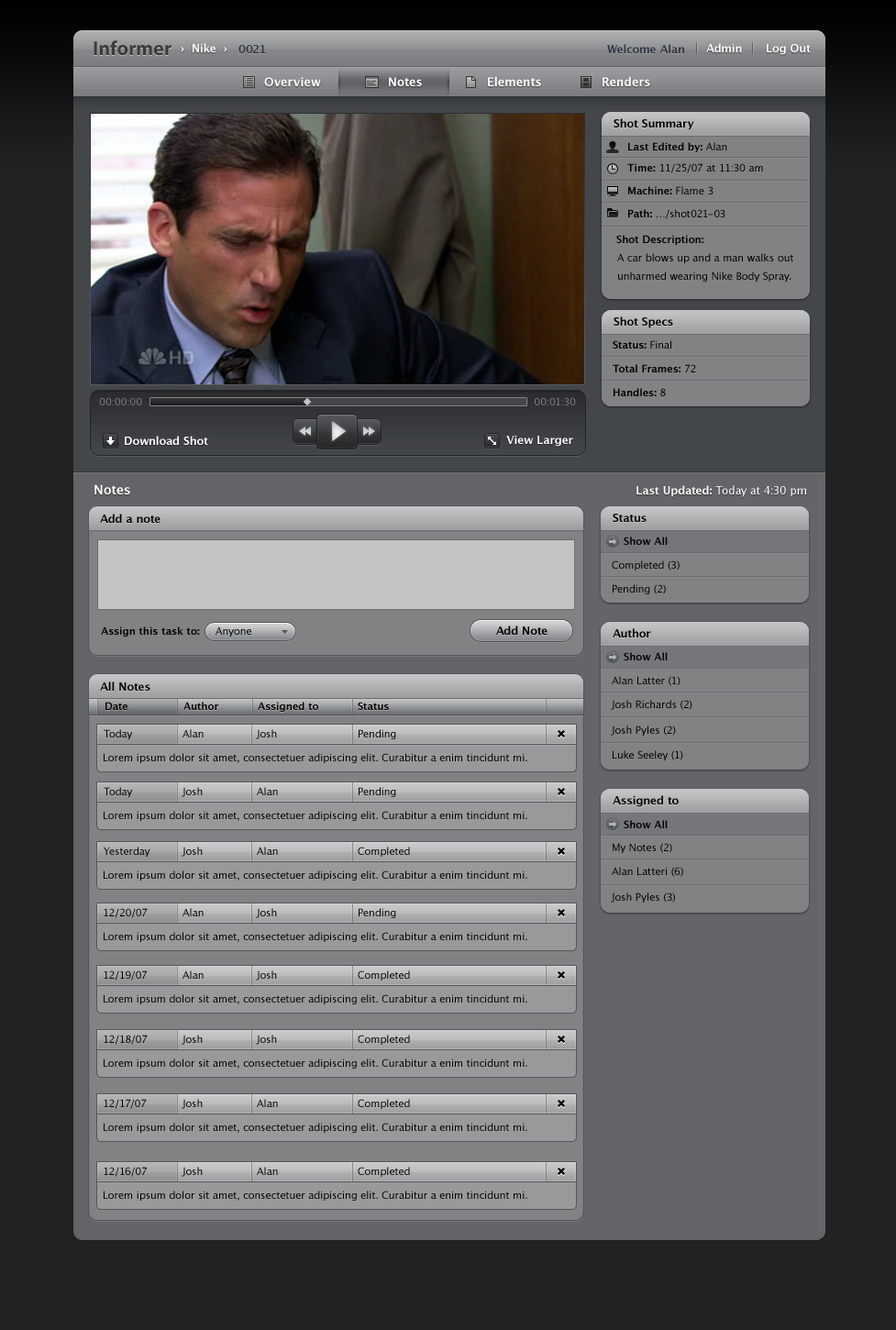
<style>
.page{position:relative;width:896px;height:1330px}
.page>*{position:absolute;margin:0}
.t1{font:20.2px "MyriadPro-Bold";color:#3c3c3c}
.t2{font:11px "LucidaGrande-Bold";color:#ffffff}
.t3{font:11px "LucidaGrande-Bold";color:#303643}
.t4{font:11.9px "LucidaGrande-Bold";color:#ffffff}
.t5{font:11px "LucidaGrande-Bold";color:#000000}
.t6{font:10.1px "LucidaGrande-Bold";color:#000000}
.t7{font:10.1px "LucidaGrande";color:#000000}
.t8{font:10.1px/18px "LucidaGrande";color:#000000}
.t9{font:10.1px "LucidaGrande";color:#808284}
.t10{font:12.8px "LucidaGrande-Bold";color:#ffffff}
.t11{font:11px "LucidaGrande";color:#ffffff}
.t12{font:10.1px "LucidaGrande-Bold";color:#020202}
</style>
<div class="page">
<p class="t1" style="left:94px;top:40px;width:78px;height:16px">Informer</p>
<p class="t2" style="left:181px;top:43px;width:47px;height:9px">›  Nike  ›</p>
<p class="t3" style="left:239px;top:45px;width:27px;height:8px">0021</p>
<p class="t3" style="left:607px;top:44px;width:77px;height:9px">Welcome Alan</p>
<p class="t2" style="left:706px;top:43px;width:36px;height:9px">Admin</p>
<p class="t2" style="left:767px;top:44px;width:44px;height:11px">Log Out</p>
<p class="t4" style="left:264px;top:77px;width:57px;height:9px">Overview</p>
<p class="t4" style="left:389px;top:77px;width:33px;height:9px">Notes</p>
<p class="t4" style="left:488px;top:76px;width:53px;height:10px">Elements</p>
<p class="t4" style="left:603px;top:76px;width:47px;height:10px">Renders</p>
<p class="t5" style="left:614px;top:118px;width:81px;height:12px">Shot Summary</p>
<p class="t6" style="left:628px;top:142px;width:100px;height:10px">Last Edited by:<span class="t7"> Alan</span></p>
<p class="t7" style="left:628px;top:163px;width:135px;height:10px"><span class="t6">Time: </span>11/25/07 at 11:30 am</p>
<p class="t6" style="left:628px;top:186px;width:86px;height:9px">Machine: <span class="t7">Flame 3</span></p>
<p class="t7" style="left:628px;top:209px;width:98px;height:10px"><span class="t6">Path: </span>…/shot021-03</p>
<p class="t6" style="left:617px;top:235px;width:87px;height:10px">Shot Description:</p>
<p class="t8" style="left:617px;top:253px;width:177px;height:29px">A car blows up and a man walks out unharmed wearing Nike Body Spray.</p>
<p class="t5" style="left:614px;top:317px;width:59px;height:11px">Shot Specs</p>
<p class="t6" style="left:613px;top:340px;width:59px;height:9px">Status:<span class="t7"> Final</span></p>
<p class="t6" style="left:613px;top:364px;width:83px;height:8px">Total Frames:<span class="t7"> 72</span></p>
<p class="t6" style="left:614px;top:388px;width:52px;height:8px">Handles:<span class="t7"> 8</span></p>
<p class="t9" style="left:99px;top:397px;width:43px;height:9px">00:00:00</p>
<p class="t9" style="left:535px;top:397px;width:41px;height:9px">00:01:30</p>
<p class="t2" style="left:125px;top:436px;width:83px;height:9px">Download Shot</p>
<p class="t2" style="left:506px;top:436px;width:67px;height:11px">View Larger</p>
<p class="t10" style="left:94px;top:484px;width:36px;height:11px">Notes</p>
<p class="t11" style="left:637px;top:485px;width:169px;height:12px"><span class="t2">Last Updated: </span>Today at 4:30 pm</p>
<p class="t5" style="left:100px;top:514px;width:61px;height:9px">Add a note</p>
<p class="t5" style="left:613px;top:514px;width:34px;height:8px">Status</p>
<p class="t12" style="left:624px;top:537px;width:44px;height:8px">Show All</p>
<p class="t7" style="left:612px;top:561px;width:68px;height:10px">Completed (3)</p>
<p class="t7" style="left:613px;top:584px;width:53px;height:11px">Pending (2)</p>
<p class="t6" style="left:101px;top:627px;width:99px;height:10px">Assign this task to:</p>
<p class="t5" style="left:496px;top:626px;width:52px;height:9px">Add Note</p>
<p class="t5" style="left:613px;top:628px;width:38px;height:10px">Author</p>
<p class="t12" style="left:624px;top:652px;width:44px;height:9px">Show All</p>
<p class="t7" style="left:612px;top:676px;width:69px;height:10px">Alan Latter (1)</p>
<p class="t5" style="left:100px;top:682px;width:50px;height:9px">All Notes</p>
<p class="t6" style="left:106px;top:702px;width:22px;height:8px">Date</p>
<p class="t6" style="left:183px;top:702px;width:36px;height:8px">Author</p>
<p class="t6" style="left:258px;top:702px;width:60px;height:10px">Assigned to</p>
<p class="t6" style="left:358px;top:702px;width:31px;height:8px">Status</p>
<p class="t7" style="left:611px;top:700px;width:82px;height:10px">Josh Richards (2)</p>
<p class="t7" style="left:611px;top:726px;width:65px;height:10px">Josh Pyles (2)</p>
<p class="t7" style="left:104px;top:729px;width:29px;height:10px">Today</p>
<p class="t7" style="left:183px;top:729px;width:21px;height:9px">Alan</p>
<p class="t7" style="left:256px;top:729px;width:21px;height:10px">Josh</p>
<p class="t7" style="left:359px;top:729px;width:37px;height:10px">Pending</p>
<p class="t7" style="left:104px;top:753px;width:424px;height:10px">Lorem ipsum dolor sit amet, consectetuer adipiscing elit. Curabitur a enim tincidunt mi.</p>
<p class="t7" style="left:613px;top:750px;width:71px;height:11px">Luke Seeley (1)</p>
<p class="t7" style="left:104px;top:787px;width:29px;height:10px">Today</p>
<p class="t7" style="left:182px;top:787px;width:21px;height:10px">Josh</p>
<p class="t7" style="left:257px;top:787px;width:21px;height:8px">Alan</p>
<p class="t7" style="left:359px;top:787px;width:37px;height:10px">Pending</p>
<p class="t5" style="left:613px;top:795px;width:66px;height:12px">Assigned to</p>
<p class="t7" style="left:104px;top:811px;width:424px;height:10px">Lorem ipsum dolor sit amet, consectetuer adipiscing elit. Curabitur a enim tincidunt mi.</p>
<p class="t12" style="left:624px;top:820px;width:44px;height:8px">Show All</p>
<p class="t7" style="left:613px;top:843px;width:59px;height:10px">My Notes (2)</p>
<p class="t7" style="left:104px;top:847px;width:46px;height:10px">Yesterday</p>
<p class="t7" style="left:182px;top:847px;width:21px;height:10px">Josh</p>
<p class="t7" style="left:257px;top:847px;width:21px;height:8px">Alan</p>
<p class="t7" style="left:358px;top:847px;width:52px;height:10px">Completed</p>
<p class="t7" style="left:612px;top:867px;width:72px;height:10px">Alan Latteri (6)</p>
<p class="t7" style="left:104px;top:871px;width:424px;height:10px">Lorem ipsum dolor sit amet, consectetuer adipiscing elit. Curabitur a enim tincidunt mi.</p>
<p class="t7" style="left:611px;top:893px;width:64px;height:10px">Josh Pyles (3)</p>
<p class="t7" style="left:104px;top:908px;width:44px;height:10px">12/20/07</p>
<p class="t7" style="left:183px;top:908px;width:21px;height:9px">Alan</p>
<p class="t7" style="left:256px;top:908px;width:21px;height:10px">Josh</p>
<p class="t7" style="left:359px;top:908px;width:37px;height:10px">Pending</p>
<p class="t7" style="left:104px;top:932px;width:424px;height:10px">Lorem ipsum dolor sit amet, consectetuer adipiscing elit. Curabitur a enim tincidunt mi.</p>
<p class="t7" style="left:104px;top:971px;width:43px;height:10px">12/19/07</p>
<p class="t7" style="left:183px;top:971px;width:21px;height:8px">Alan</p>
<p class="t7" style="left:256px;top:971px;width:21px;height:10px">Josh</p>
<p class="t7" style="left:358px;top:971px;width:52px;height:10px">Completed</p>
<p class="t7" style="left:104px;top:995px;width:424px;height:10px">Lorem ipsum dolor sit amet, consectetuer adipiscing elit. Curabitur a enim tincidunt mi.</p>
<p class="t7" style="left:104px;top:1035px;width:44px;height:10px">12/18/07</p>
<p class="t7" style="left:182px;top:1035px;width:21px;height:10px">Josh</p>
<p class="t7" style="left:256px;top:1035px;width:21px;height:10px">Josh</p>
<p class="t7" style="left:358px;top:1035px;width:52px;height:10px">Completed</p>
<p class="t7" style="left:104px;top:1059px;width:424px;height:10px">Lorem ipsum dolor sit amet, consectetuer adipiscing elit. Curabitur a enim tincidunt mi.</p>
<p class="t7" style="left:104px;top:1099px;width:43px;height:10px">12/17/07</p>
<p class="t7" style="left:182px;top:1099px;width:21px;height:10px">Josh</p>
<p class="t7" style="left:257px;top:1099px;width:21px;height:8px">Alan</p>
<p class="t7" style="left:358px;top:1099px;width:52px;height:10px">Completed</p>
<p class="t7" style="left:104px;top:1123px;width:424px;height:10px">Lorem ipsum dolor sit amet, consectetuer adipiscing elit. Curabitur a enim tincidunt mi.</p>
<p class="t7" style="left:104px;top:1167px;width:43px;height:10px">12/16/07</p>
<p class="t7" style="left:182px;top:1167px;width:21px;height:10px">Josh</p>
<p class="t7" style="left:257px;top:1167px;width:21px;height:8px">Alan</p>
<p class="t7" style="left:358px;top:1167px;width:52px;height:10px">Completed</p>
<p class="t7" style="left:104px;top:1191px;width:424px;height:10px">Lorem ipsum dolor sit amet, consectetuer adipiscing elit. Curabitur a enim tincidunt mi.</p>
</div>
